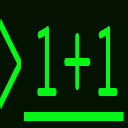
<style>
.page{position:relative;width:128px;height:128px;background:#041300}
.page>*{position:absolute;margin:0}
.t1{font:212px "RichmondDisplay-SemiBold";color:#06f717;scale:0.27 1}
.t2{font:111.2px "Courier";color:#06f717;scale:0.46 1}
.t3{font:212px "RichmondDisplay-SemiBold";color:#06f717}
</style>
<div class="page">
<p class="t1" style="left:0px;top:19px;width:21px;height:90px">&gt;</p>
<p class="t2" style="left:37px;top:26px;width:81px;height:70px">1+1</p>
<p class="t3" style="left:24px;top:112px;width:100px;height:9px">_</p>
</div>
